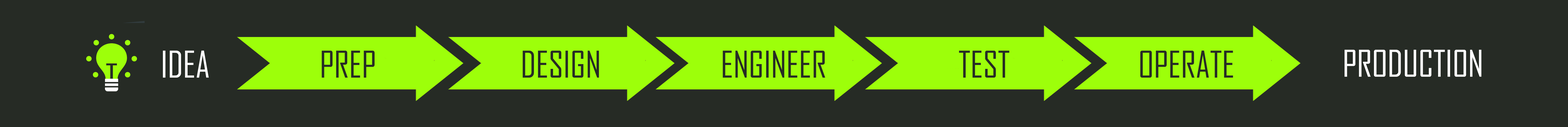
<style>
.page{position:relative;width:1568px;height:127px;background:#262b25}
.page>*{position:absolute;margin:0}
.t1{font:35.3px "AgencyFB-Reg";color:#ffffff}
.t2{font:35.3px "AgencyFB-Reg";color:#262b25}
</style>
<div class="page">
<p class="t1" style="left:163px;top:51px;width:46px;height:27px">IDEA</p>
<p class="t2" style="left:322px;top:51px;width:53px;height:27px">PREP</p>
<p class="t2" style="left:522px;top:51px;width:77px;height:27px">DESIGN</p>
<p class="t2" style="left:723px;top:51px;width:102px;height:27px">ENGINEER</p>
<p class="t2" style="left:959px;top:51px;width:50px;height:27px">TEST</p>
<p class="t2" style="left:1140px;top:51px;width:93px;height:27px">OPERATE</p>
<p class="t1" style="left:1345px;top:50px;width:137px;height:27px">PRODUCTION</p>
</div>
